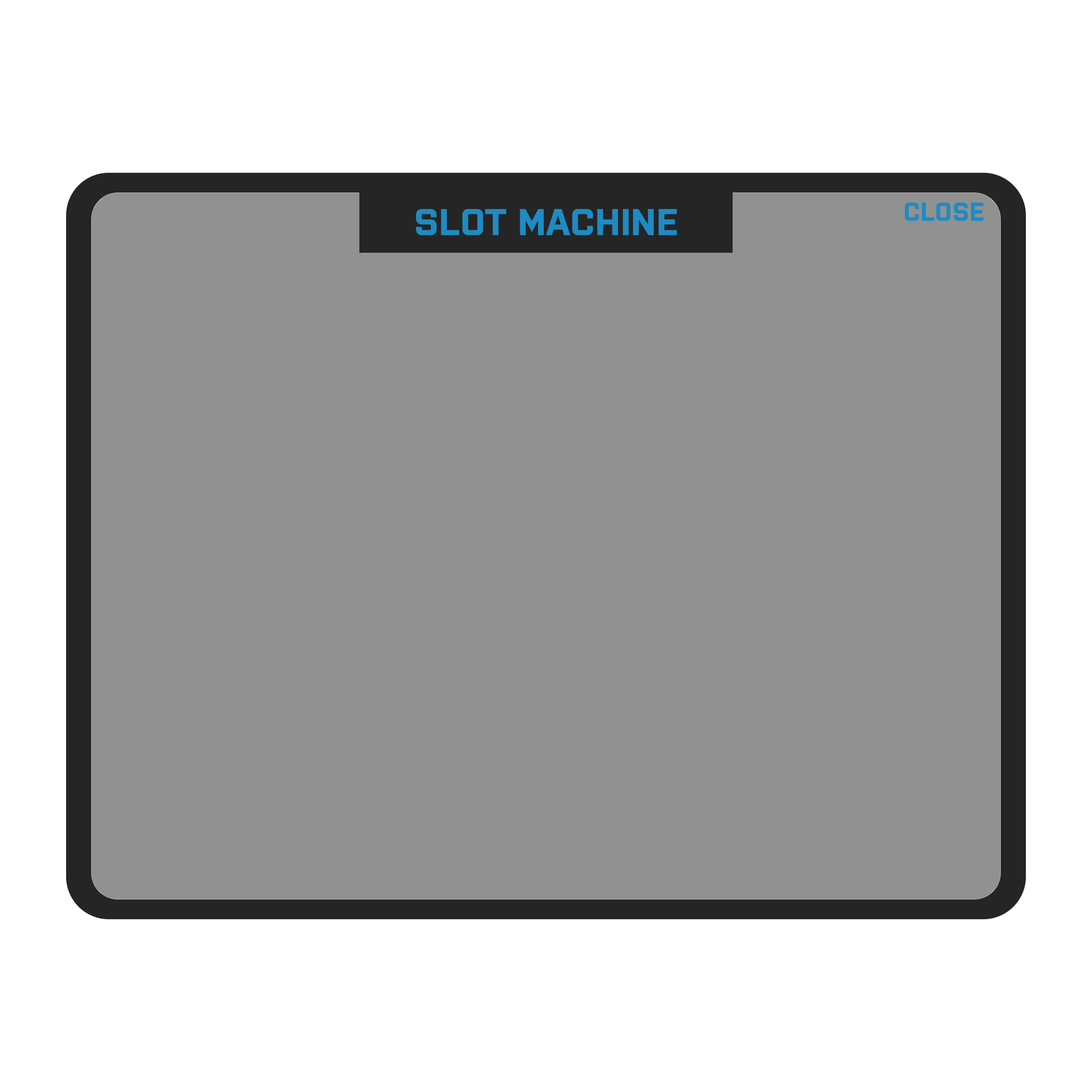
<style>
.page{position:relative;width:1092px;height:1092px;background:#919191}
.page>*{position:absolute;margin:0}
.t1{font:37.3px "Purista-Bold";color:#1e8bc3}
.t2{font:25.6px "Purista-Bold";color:#1e8bc3}
</style>
<div class="page">
<p class="t1" style="left:416px;top:209px;width:261px;height:26px">SLOT MACHINE</p>
<p class="t2" style="left:905px;top:203px;width:79px;height:18px">CLOSE</p>
</div>
